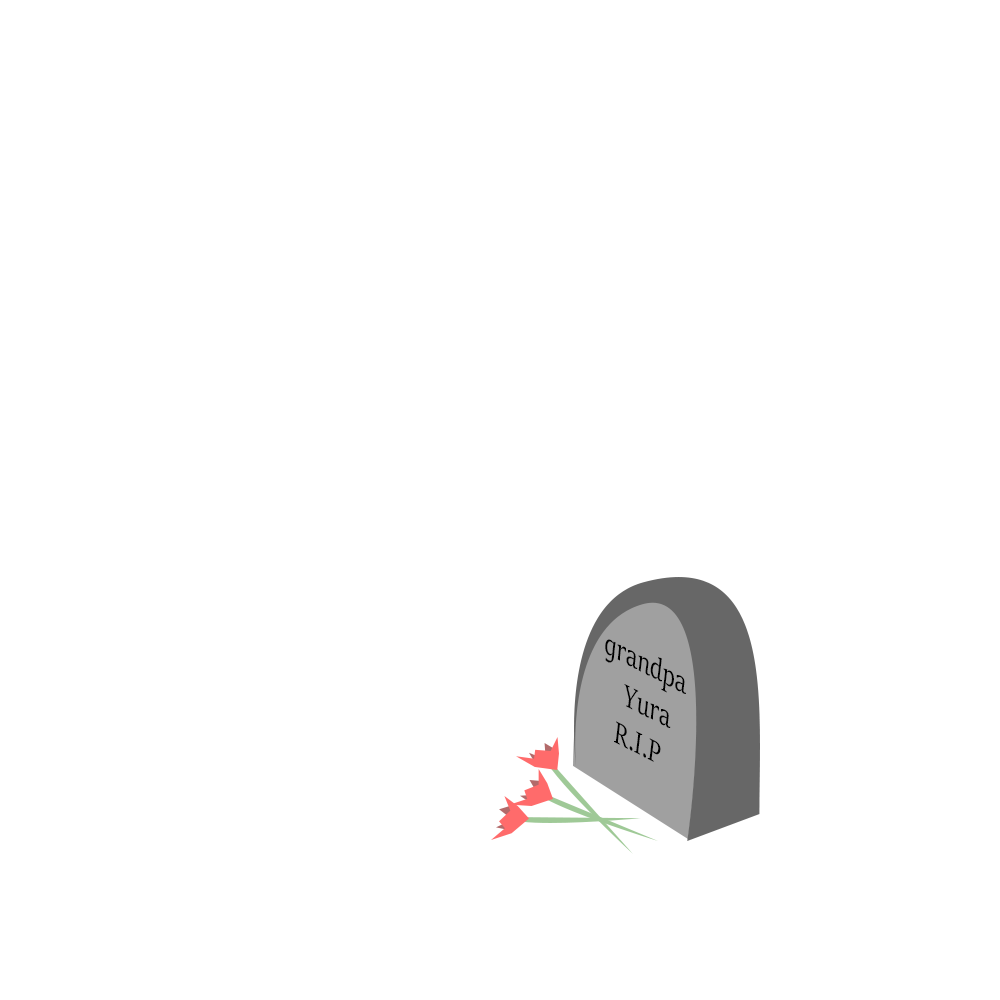
<style>
.page{position:relative;width:1000px;height:1000px;background:#ffffff}
.page>*{position:absolute;margin:0}
.t1{font:8.5px "SitkaHeading-Italic";color:#000000;scale:0.75 1}
</style>
<div class="page">
<p class="t1" style="left:605px;top:639px;width:81px;height:123px;text-align:center;rotate:27deg">grandpa<br>Yura<br>R.I.P</p>
</div>
